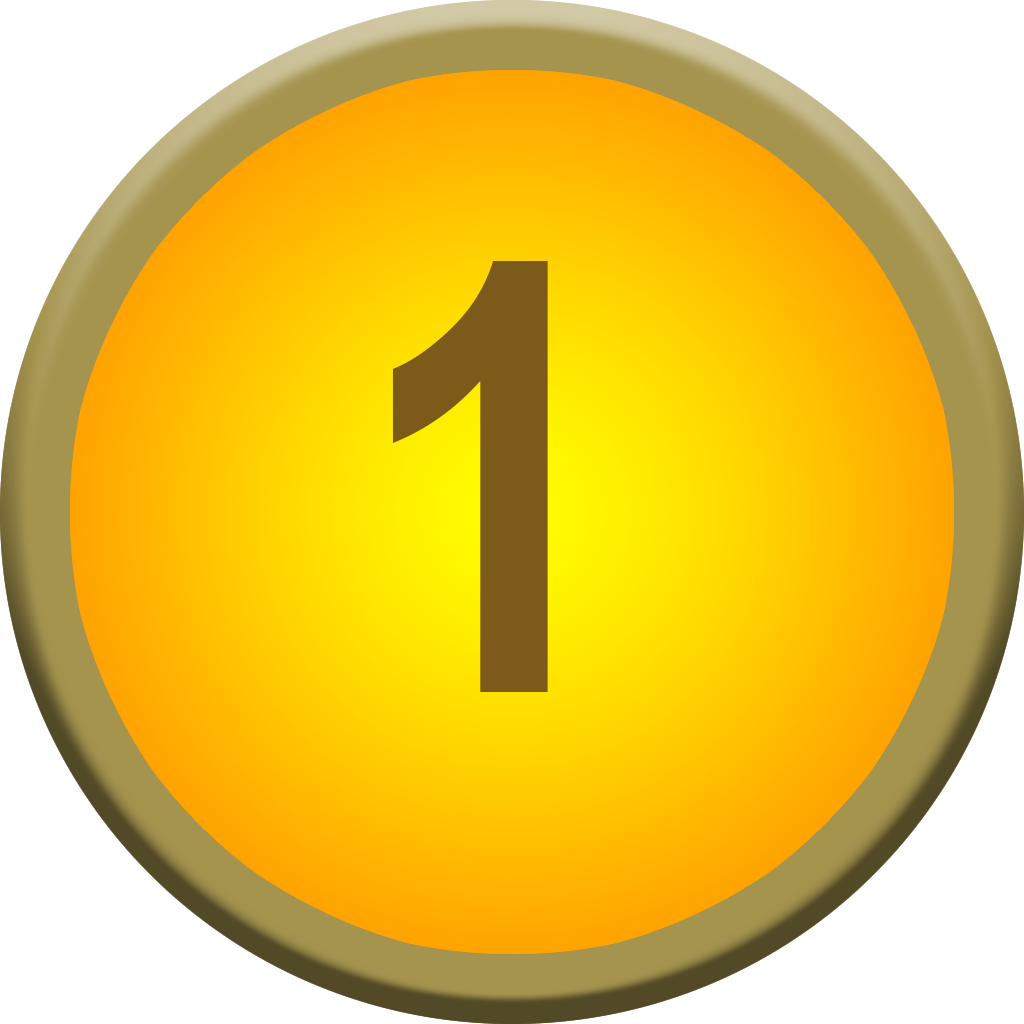
<style>
.page{position:relative;width:1024px;height:1024px;background:#ffffff}
.page>*{position:absolute;margin:0}
.t1{font:600px "ArialNarrow-Bold";color:#7c5a19}
</style>
<div class="page">
<p class="t1" style="left:392px;top:261px;width:156px;height:431px">1</p>
</div>
